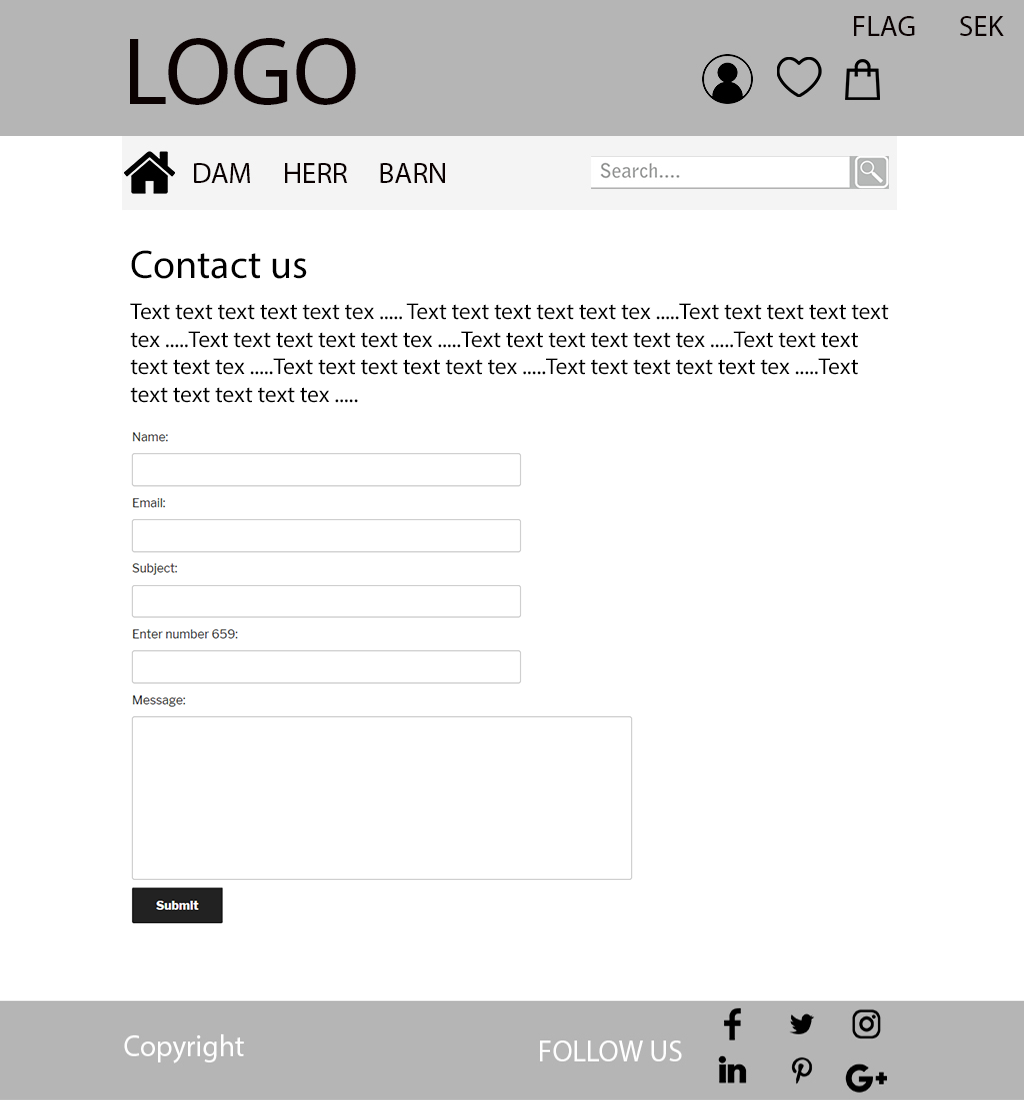
<style>
.page{position:relative;width:1024px;height:1100px;background:#ffffff}
.page>*{position:absolute;margin:0}
.t1{font:40px "MyriadPro-Regular";color:#000000}
.t2{font:23px "MyriadPro-Regular";color:#000000}
</style>
<div class="page">
<p class="t1" style="left:131px;top:250px;width:176px;height:29px">Contact us</p>
<p class="t2" style="left:130px;top:303px;width:759px;height:100px">Text text text text text tex ..... Text text text text text tex .....Text text text text text tex .....Text text text text text tex .....Text text text text text tex .....Text text text text text tex .....Text text text text text tex .....Text text text text text tex .....Text text text text text tex .....</p>
</div>
